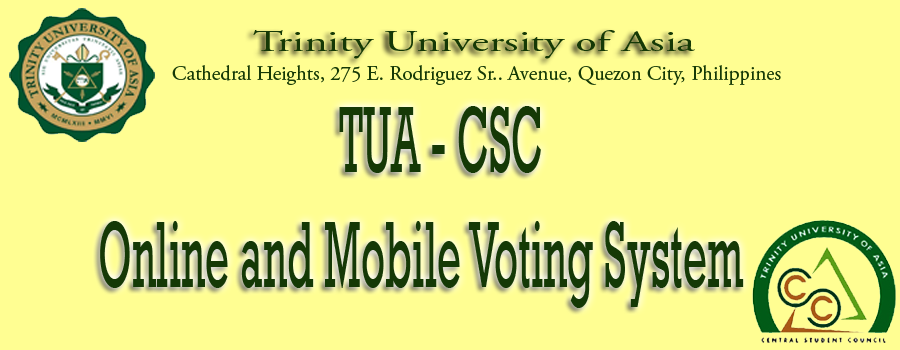
<style>
.page{position:relative;width:900px;height:350px;background:#fffe92}
.page>*{position:absolute;margin:0}
.t1{font:29.7px "AGaramondPro-Regular";color:#153906;scale:1.52 1}
.t2{font:20.8px "AGaramondPro-Regular";color:#153906}
.t3{font:96px "Rockwell";color:#153906;scale:0.44 1}
</style>
<div class="page">
<p class="t1" style="left:253px;top:30px;width:442px;height:29px">Trinity University of Asia</p>
<p class="t2" style="left:172px;top:65px;width:609px;height:20px">Cathedral Heights, 275 E. Rodriguez Sr.. Avenue, Quezon City, Philippines</p>
<p class="t3" style="left:100px;top:106px;width:644px;height:202px;text-align:center">TUA - CSC <br>Online and Mobile Voting System</p>
</div>
